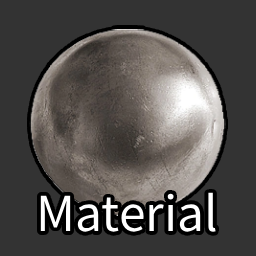
<style>
.page{position:relative;width:256px;height:256px;background:#333333}
.page>*{position:absolute;margin:0}
.t1{font:48px "NotoSansKR-Regular";color:#ffffff}
</style>
<div class="page">
<p class="t1" style="left:40px;top:192px;width:176px;height:40px">Material</p>
</div>
